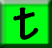
<style>
.page{position:relative;width:52px;height:48px;background:#00ff12}
.page>*{position:absolute;margin:0}
.t1{font:54.2px "TektonPro-Bold";color:#000000}
</style>
<div class="page">
<p class="t1" style="left:13px;top:7px;width:26px;height:33px">t</p>
</div>
